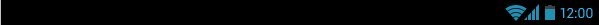
<style>
.page{position:relative;width:599px;height:25px;background:#000000}
.page>*{position:absolute;margin:0}
.t1{font:14px "Roboto-Regular";color:#33b5e5}
</style>
<div class="page">
<p class="t1" style="left:560px;top:8px;width:33px;height:10px">12:00</p>
</div>
